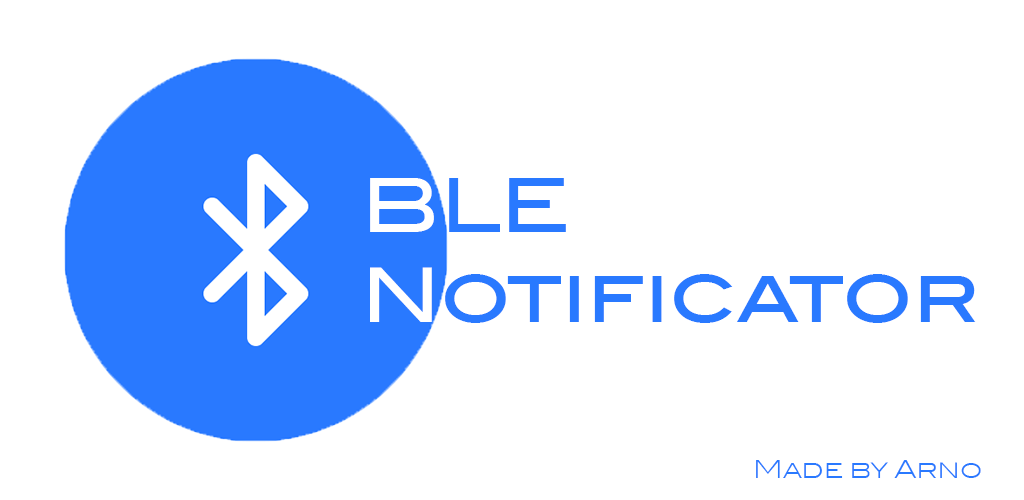
<style>
.page{position:relative;width:1024px;height:500px;background:#ffffff}
.page>*{position:absolute;margin:0}
.t1{font:75px "BlairITC-Medium";color:#2979ff}
.t2{font:75px "BlairITC-Medium";color:#ffffff}
.t3{font:25px "BlairITC-Light";color:#2979ff}
</style>
<div class="page">
<p class="t1" style="left:370px;top:178px;width:606px;height:145px"><span class="t2">B</span>LE<br><span class="t2">N</span>otificator</p>
<p class="t3" style="left:756px;top:460px;width:225px;height:18px">Made by Arno</p>
</div>
